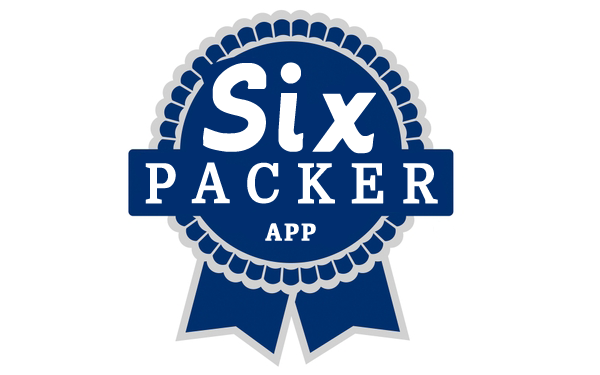
<style>
.page{position:relative;width:600px;height:375px;background:#ffffff}
.page>*{position:absolute;margin:0}
.t1{font:88px "MachineScript";letter-spacing:0.12em;color:#ffffff;font-weight:bold;scale:0.93 1}
.t2{font:88px "MachineScript";letter-spacing:0.12em;color:#ffffff;font-weight:bold;scale:0.95 1}
.t3{font:88px "MachineScript";letter-spacing:0.12em;color:#ffffff;font-weight:bold;scale:0.88 1}
.t4{font:55px "Domine-Bold";letter-spacing:0.3em;color:#ffffff;font-weight:bold;scale:0.91 1}
.t5{font:25.3px "Kefa-Bold";letter-spacing:0.06em;color:#ffffff;font-weight:bold;scale:0.91 1}
</style>
<div class="page">
<p class="t1" style="left:203px;top:62px;width:173px;height:92px">S<span class="t2">i</span><span class="t3">x</span></p>
<p class="t4" style="left:145px;top:162px;width:293px;height:42px">PACKER</p>
<p class="t5" style="left:265px;top:223px;width:51px;height:18px">APP</p>
</div>
